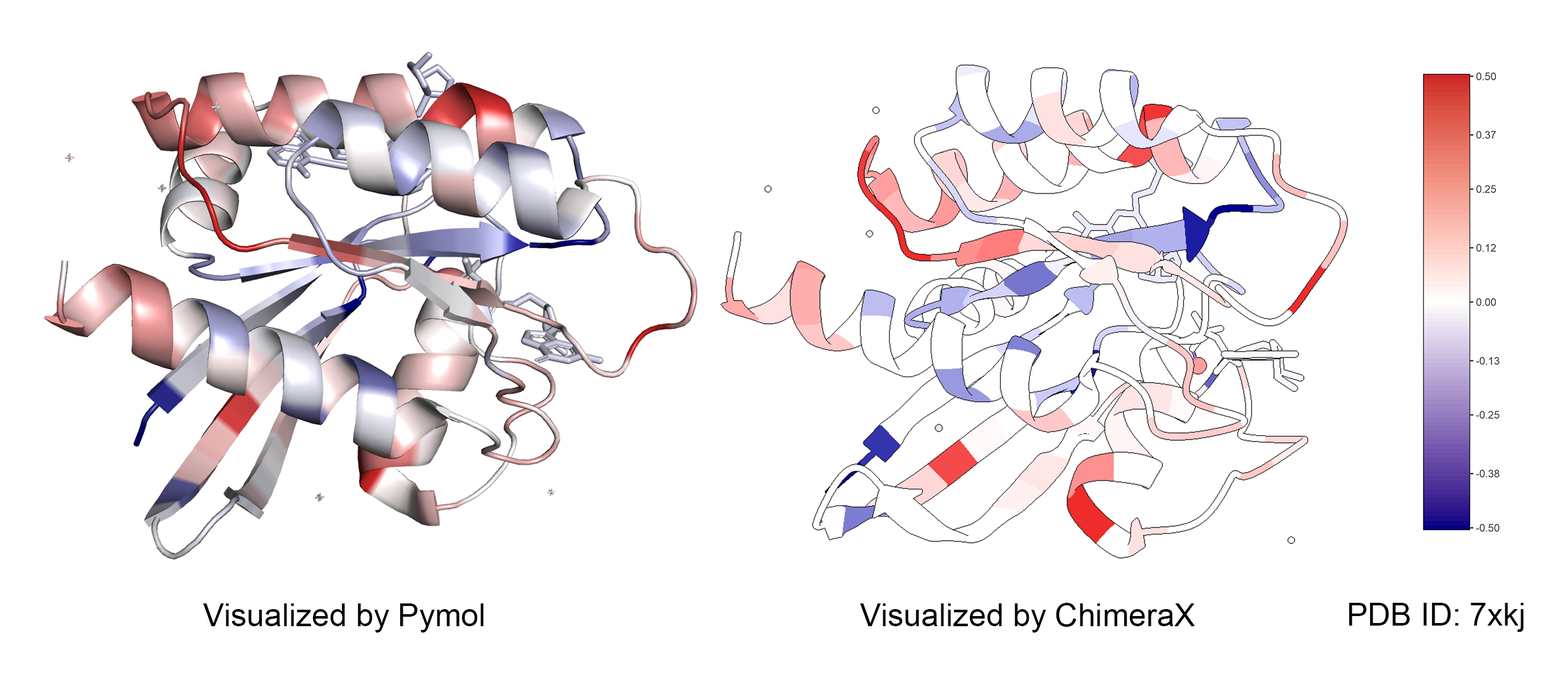
<style>
.page{position:relative;width:1568px;height:673px;background:#ffffff}
.page>*{position:absolute;margin:0}
.t1{font:31.6px "ArialMT";color:#000000}
</style>
<div class="page">
<p class="t1" style="left:203px;top:603px;width:281px;height:29px">Visualized by Pymol</p>
<p class="t1" style="left:860px;top:603px;width:335px;height:29px">Visualized by ChimeraX</p>
<p class="t1" style="left:1349px;top:603px;width:175px;height:29px">PDB ID: 7xkj</p>
</div>
